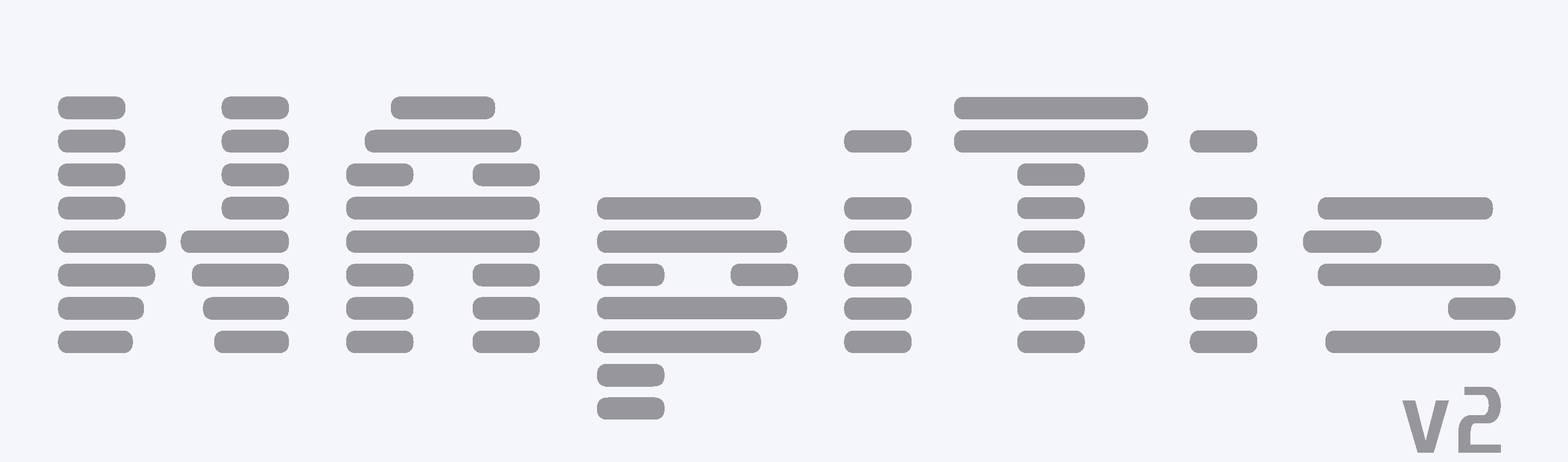
<style>
.page{position:relative;width:1568px;height:462px;background:#f5f6fa}
.page>*{position:absolute;margin:0}
.t1{font:408.9px "DS-Terminal";letter-spacing:0.05em;color:#98969d}
.t2{font:81.8px "Unispace-Bold";letter-spacing:0.05em;color:#98969d}
</style>
<div class="page">
<p class="t1" style="left:58px;top:97px;width:1458px;height:323px">WApiTis</p>
<p class="t2" style="left:1402px;top:387px;width:99px;height:66px">v2</p>
</div>
